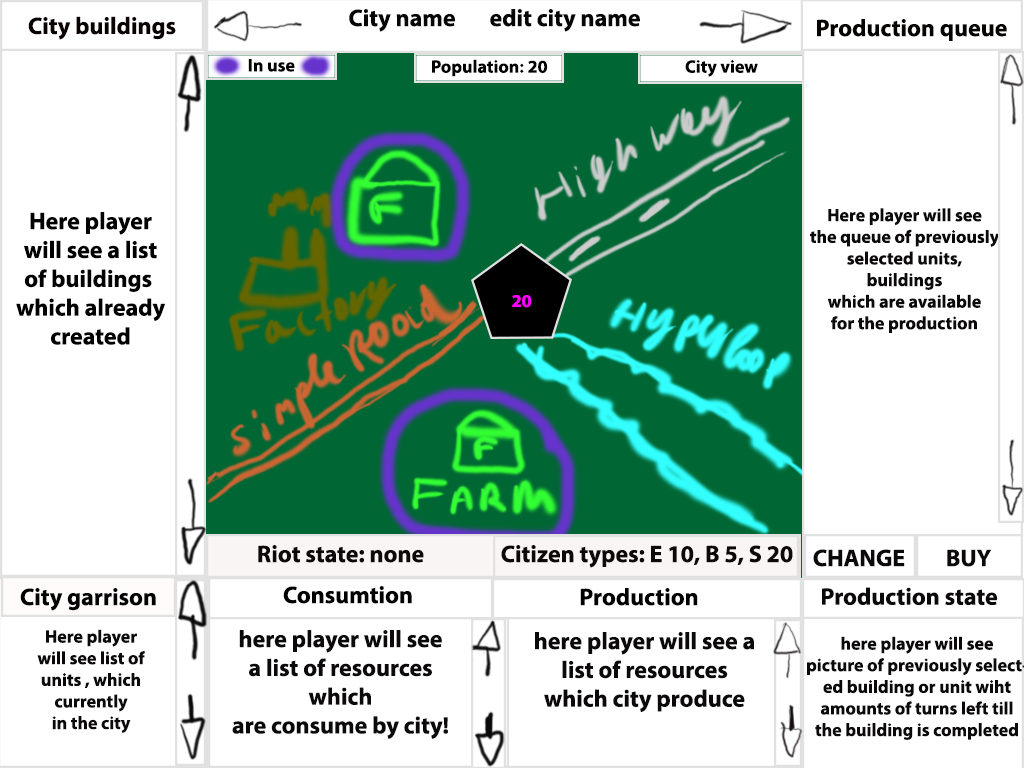
<style>
.page{position:relative;width:1024px;height:768px;background:#ffffff}
.page>*{position:absolute;margin:0}
.t1{font:24px "MyriadPro-Bold";color:#0a0202}
.t2{font:24px "MyriadPro-Bold";color:#070606}
.t3{font:24px "MyriadPro-Bold";color:#050202}
.t4{font:18px "MyriadPro-Bold";color:#000000}
.t5{font:18px "MyriadPro-Bold";color:#0b0909}
.t6{font:24px "MyriadPro-Bold";color:#000000}
.t7{font:18px "MyriadPro-Bold";color:#ff00ff}
.t8{font:18px "MyriadPro-Bold";color:#3300ff}
.t9{font:24px "MyriadPro-Bold";color:#0b0909}
.t10{font:24px "MyriadPro-Bold";color:#020202}
</style>
<div class="page">
<p class="t1" style="left:28px;top:16px;width:148px;height:24px">City buildings</p>
<p class="t2" style="left:349px;top:9px;width:291px;height:23px">City name       edit city name</p>
<p class="t3" style="left:817px;top:19px;width:190px;height:22px">Production queue</p>
<p class="t4" style="left:248px;top:59px;width:47px;height:13px">In use</p>
<p class="t4" style="left:432px;top:59px;width:116px;height:18px">Population: 20</p>
<p class="t4" style="left:685px;top:60px;width:73px;height:17px">City view</p>
<p class="t5" style="left:810px;top:208px;width:190px;height:125px;text-align:center">Here player will see<br>the queue of previously<br>selected units, <br>buildings<br>which are available<br>for the production</p>
<p class="t6" style="left:16px;top:212px;width:149px;height:133px;text-align:center">Here player<br>will see a list<br>of buildings <br>which already<br>created</p>
<p class="t7" style="left:512px;top:295px;width:20px;height:13px"><span class="t8"><br><br></span>20</p>
<p class="t9" style="left:258px;top:545px;width:166px;height:18px">Riot state: none</p>
<p class="t9" style="left:501px;top:545px;width:292px;height:23px">Citizen types: E 10, B 5, S 20</p>
<p class="t9" style="left:813px;top:549px;width:92px;height:18px">CHANGE</p>
<p class="t9" style="left:947px;top:549px;width:45px;height:18px">BUY</p>
<p class="t10" style="left:20px;top:588px;width:136px;height:23px">City garrison</p>
<p class="t6" style="left:283px;top:586px;width:129px;height:18px">Consumtion</p>
<p class="t6" style="left:580px;top:588px;width:118px;height:18px">Production</p>
<p class="t9" style="left:822px;top:587px;width:176px;height:18px">Production state</p>
<p class="t5" style="left:37px;top:629px;width:108px;height:104px;text-align:center">Here player <br>will see list of  <br>units , which <br>currently <br>in the city</p>
<p class="t9" style="left:232px;top:630px;width:216px;height:109px;text-align:center">here player will see <br>a list of resources<br>which <br>are consume by city!</p>
<p class="t9" style="left:535px;top:632px;width:220px;height:80px;text-align:center">here player will see a<br>list of resources<br>which city produce</p>
</div>
